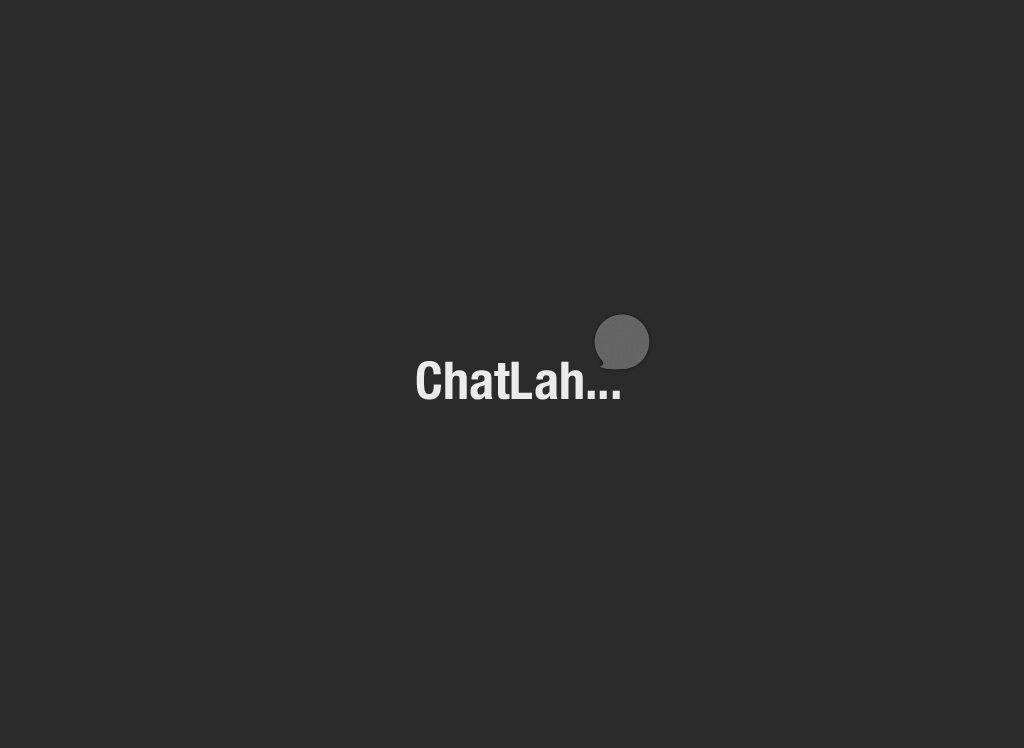
<style>
.page{position:relative;width:1024px;height:748px;background:#2b2b2b}
.page>*{position:absolute;margin:0}
.t1{font:52.1px "HelveticaNeue-CondensedBold";color:#ebebeb}
</style>
<div class="page">
<p class="t1" style="left:416px;top:361px;width:204px;height:39px">ChatLah...</p>
</div>
